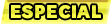
<style>
.page{position:relative;width:112px;height:24px}
.page>*{position:absolute;margin:0}
.t1{font:16px "RodinNTLGPro-UB";letter-spacing:0.015em;color:#f7f747;scale:1.04 1}
</style>
<div class="page">
<p class="t1" style="left:11px;top:5px;width:90px;height:14px">ESPECIAL</p>
</div>
